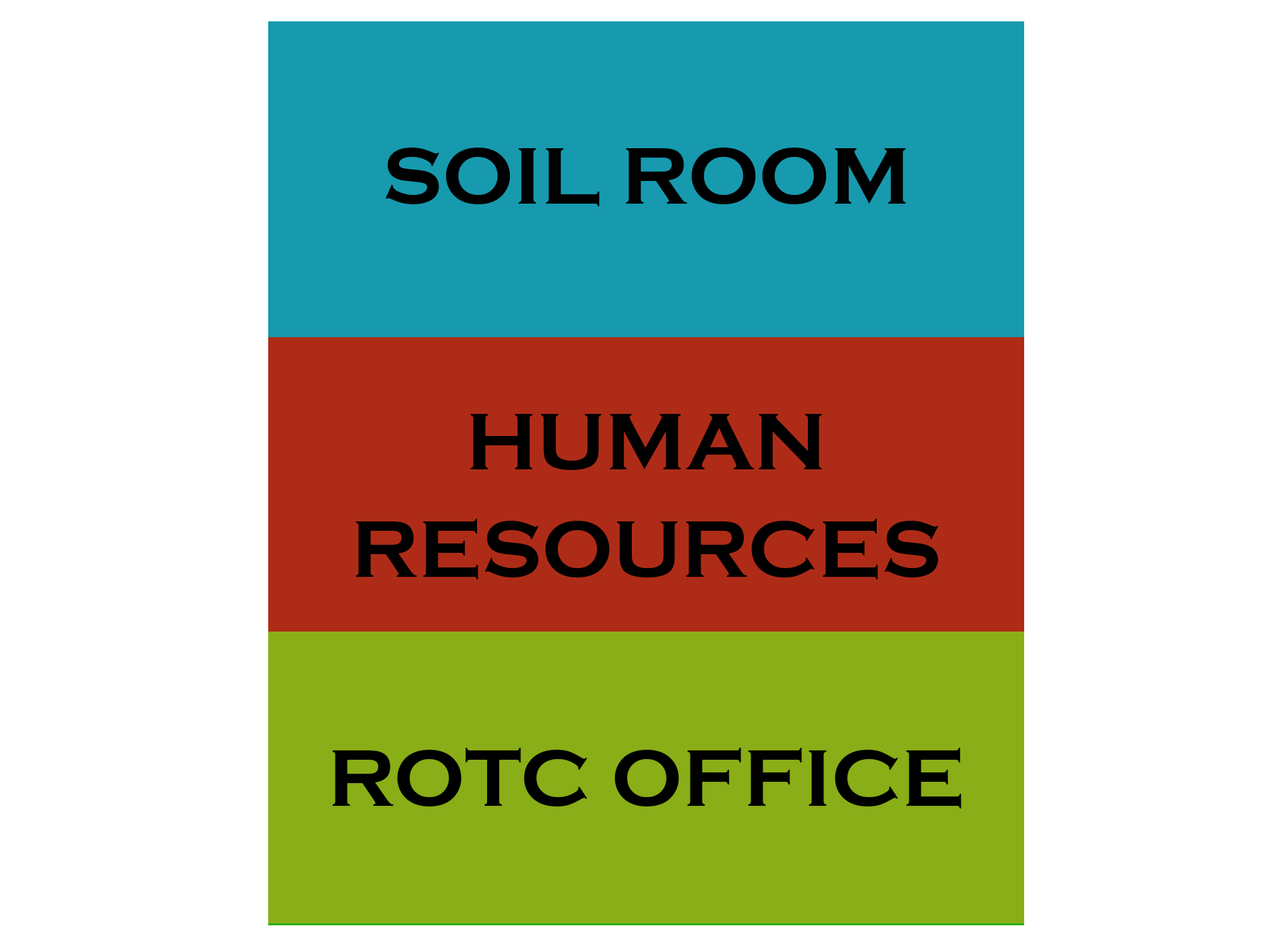
<style>
.page{position:relative;width:1261px;height:946px;background:#ffffff}
.page>*{position:absolute;margin:0}
.t1{font:83.4px "CopperplateGothic-Bold";color:#000000}
.t2{font:83.4px/107.4px "CopperplateGothic-Bold";color:#000000}
</style>
<div class="page">
<p class="t1" style="left:385px;top:147px;width:521px;height:59px">SOIL ROOM</p>
<p class="t2" style="left:356px;top:414px;width:583px;height:165px;text-align:center">HUMAN<br>RESOURCES</p>
<p class="t1" style="left:332px;top:747px;width:630px;height:61px">ROTC OFFICE</p>
</div>
